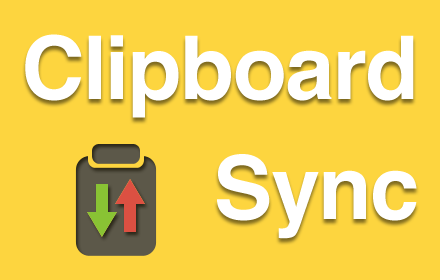
<style>
.page{position:relative;width:440px;height:280px;background:#fdd53f}
.page>*{position:absolute;margin:0}
.t1{font:88px/120px "Helvetica-Bold";color:#ffffff}
</style>
<div class="page">
<p class="t1" style="left:25px;top:34px;width:392px;height:205px;text-align:right">Clipboard<br>Sync</p>
</div>
